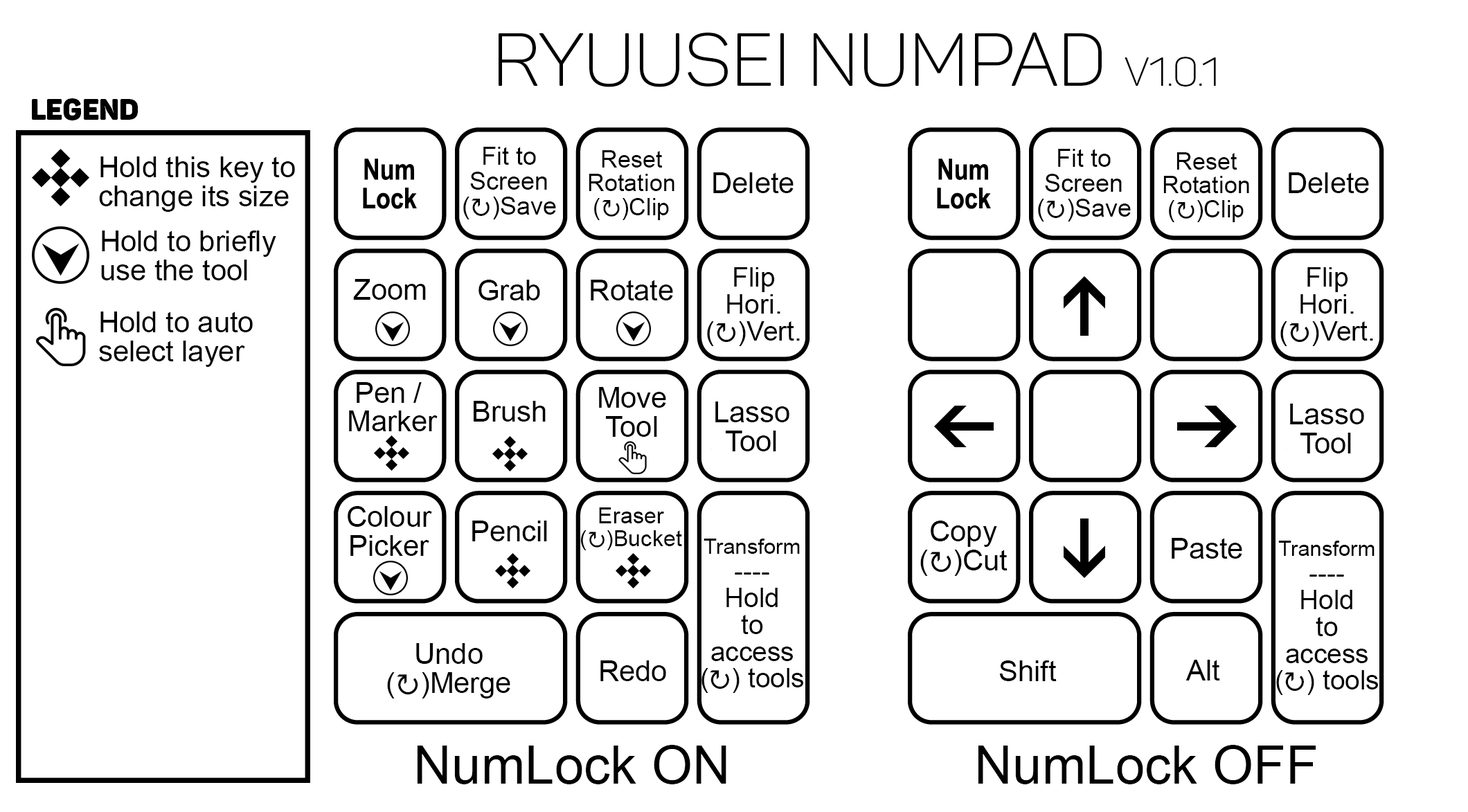
<style>
.page{position:relative;width:1468px;height:812px;background:#ffffff}
.page>*{position:absolute;margin:0}
.t1{font:74.5px "Panton-LightCaps";color:#000000}
.t2{font:40.4px "Panton-LightCaps";color:#000000}
.t3{font:28.9px "Panton-BlackCaps";color:#000000}
.t4{font:24.9px/24.9px "ArialMT";color:#000000}
.t5{font:24.9px/24.9px "SegoeUIEmoji";color:#000000}
.t6{font:28.9px/28.9px "ArialMT";color:#000000}
.t7{font:23.8px/23.8px "ArialMT";color:#000000}
.t8{font:23.8px/23.8px "SegoeUIEmoji";color:#000000}
.t9{font:28.9px "ArialMT";color:#000000}
.t10{font:27px/27px "ArialMT";color:#000000}
.t11{font:27px/27px "SegoeUIEmoji";color:#000000}
.t12{font:22.3px/22.3px "ArialMT";color:#000000}
.t13{font:22.3px/22.3px "SegoeUIEmoji";color:#000000}
.t14{font:28.9px/28.9px "SegoeUIEmoji";color:#000000}
.t15{font:26.8px/26.8px "ArialMT";color:#000000}
.t16{font:21.5px/26.8px "ArialMT";color:#000000}
.t17{font:26.8px/26.8px "SegoeUIEmoji";color:#000000}
.t18{font:52.8px "ArialMT";color:#000000}
</style>
<div class="page">
<p class="t1" style="left:499px;top:32px;width:717px;height:55px">RYUUSEI NUMPAD <span class="t2">V1.0.1</span></p>
<p class="t3" style="left:32px;top:98px;width:106px;height:22px">legend</p>
<p class="t4" style="left:463px;top:147px;width:93px;height:73px;text-align:center">Fit to<br>Screen<br>(<span class="t5">↻</span>)Save</p>
<p class="t4" style="left:1038px;top:149px;width:93px;height:73px;text-align:center">Fit to<br>Screen<br>(<span class="t5">↻</span>)Save</p>
<p class="t6" style="left:99px;top:156px;width:196px;height:56px;text-align:right">Hold this key to<br>change its size</p>
<p class="t7" style="left:589px;top:150px;width:85px;height:70px;text-align:center">Reset<br>Rotation<br>(<span class="t8">↻</span>)Clip</p>
<p class="t7" style="left:1163px;top:152px;width:86px;height:70px;text-align:center">Reset<br>Rotation<br>(<span class="t8">↻</span>)Clip</p>
<p class="t9" style="left:713px;top:172px;width:81px;height:21px">Delete</p>
<p class="t9" style="left:1289px;top:172px;width:80px;height:21px">Delete</p>
<p class="t6" style="left:101px;top:231px;width:175px;height:49px;text-align:right">Hold to briefly<br>use the tool</p>
<p class="t10" style="left:707px;top:267px;width:93px;height:79px;text-align:center">Flip<br>Hori.<br>(<span class="t11">↻</span>)Vert.</p>
<p class="t10" style="left:1280px;top:267px;width:93px;height:79px;text-align:center">Flip<br>Hori.<br>(<span class="t11">↻</span>)Vert.</p>
<p class="t9" style="left:353px;top:279px;width:73px;height:21px">Zoom</p>
<p class="t9" style="left:478px;top:280px;width:62px;height:21px">Grab</p>
<p class="t9" style="left:591px;top:280px;width:82px;height:21px">Rotate</p>
<p class="t6" style="left:99px;top:312px;width:154px;height:55px;text-align:right">Hold to auto<br>select layer</p>
<p class="t6" style="left:349px;top:382px;width:89px;height:49px;text-align:center">Pen / <br>Marker</p>
<p class="t6" style="left:599px;top:387px;width:67px;height:50px;text-align:center">Move<br>Tool</p>
<p class="t9" style="left:474px;top:401px;width:72px;height:21px">Brush</p>
<p class="t6" style="left:715px;top:402px;width:74px;height:49px;text-align:center">Lasso<br>Tool</p>
<p class="t6" style="left:1290px;top:404px;width:74px;height:50px;text-align:center">Lasso<br>Tool</p>
<p class="t6" style="left:348px;top:506px;width:84px;height:50px;text-align:center">Colour<br>Picker</p>
<p class="t12" style="left:581px;top:508px;width:101px;height:43px;text-align:center">Eraser<br>(<span class="t13">↻</span>)Bucket</p>
<p class="t9" style="left:472px;top:521px;width:75px;height:21px">Pencil</p>
<p class="t6" style="left:920px;top:521px;width:88px;height:55px;text-align:center">Copy<br>(<span class="t14">↻</span>)Cut</p>
<p class="t15" style="left:701px;top:539px;width:102px;height:154px;text-align:center"><span class="t16">Transform<br></span>----<br>Hold<br>to<br>access<br>(<span class="t17">↻</span>) tools</p>
<p class="t9" style="left:1172px;top:538px;width:70px;height:21px">Paste</p>
<p class="t15" style="left:1276px;top:541px;width:102px;height:154px;text-align:center"><span class="t16">Transform<br></span>----<br>Hold<br>to<br>access<br>(<span class="t17">↻</span>) tools</p>
<p class="t6" style="left:387px;top:643px;width:123px;height:56px;text-align:center">Undo<br>(<span class="t14">↻</span>)Merge</p>
<p class="t9" style="left:600px;top:661px;width:66px;height:20px">Redo</p>
<p class="t9" style="left:999px;top:661px;width:58px;height:20px">Shift</p>
<p class="t9" style="left:1186px;top:660px;width:34px;height:21px">Alt</p>
<p class="t18" style="left:417px;top:745px;width:309px;height:40px">NumLock ON</p>
<p class="t18" style="left:978px;top:745px;width:338px;height:40px">NumLock OFF</p>
</div>
